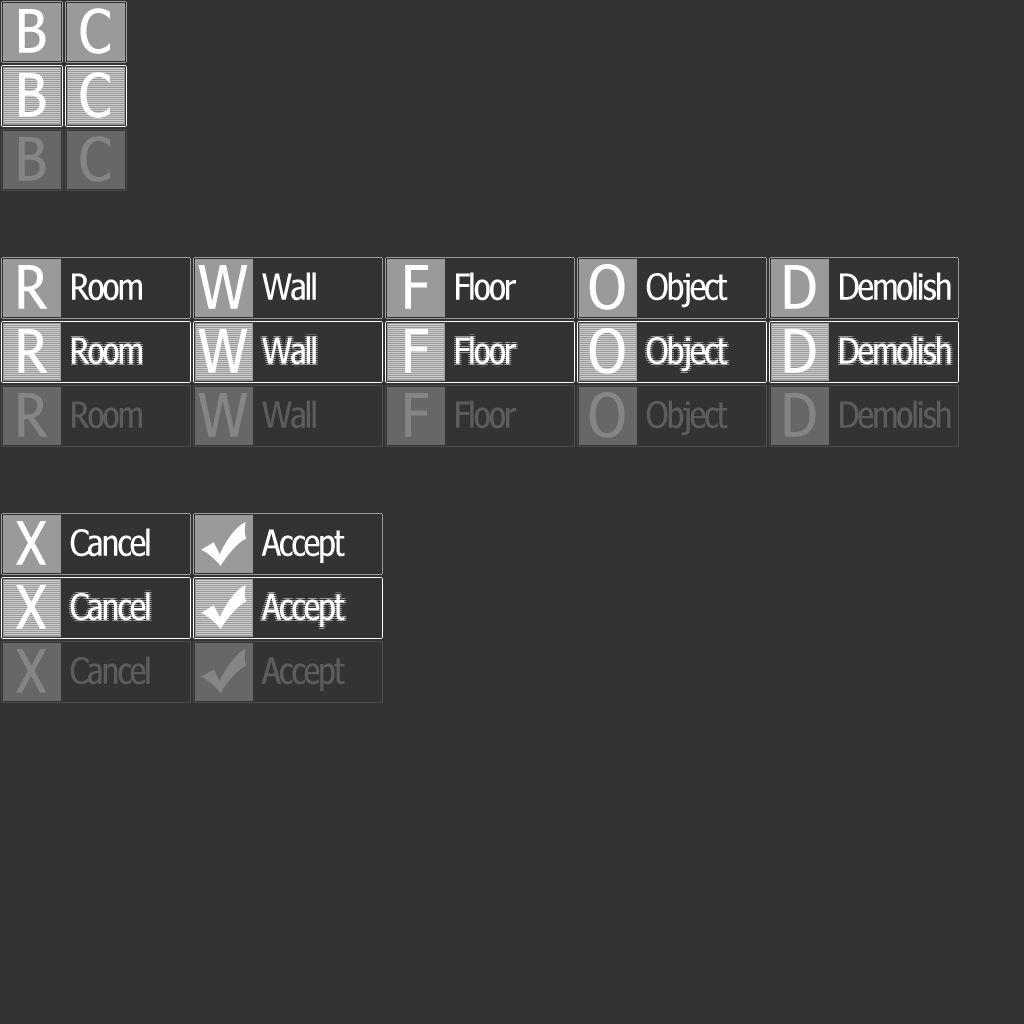
<style>
.page{position:relative;width:1024px;height:1024px;background:#333333}
.page>*{position:absolute;margin:0}
.t1{font:60px "Nina";color:#ffffff}
.t2{font:60px "Nina";color:#858585}
.t3{font:36px "Nina";letter-spacing:-0.04em;color:#ffffff}
.t4{font:36px "Nina";letter-spacing:-0.04em;color:#5c5c5c}
</style>
<div class="page">
<p class="t1" style="left:19px;top:9px;width:27px;height:44px">B</p>
<p class="t1" style="left:80px;top:8px;width:30px;height:46px">C</p>
<p class="t1" style="left:19px;top:73px;width:27px;height:44px">B</p>
<p class="t1" style="left:80px;top:72px;width:30px;height:46px">C</p>
<p class="t2" style="left:19px;top:137px;width:27px;height:44px">B</p>
<p class="t2" style="left:80px;top:136px;width:30px;height:46px">C</p>
<p class="t1" style="left:18px;top:265px;width:30px;height:44px">R</p>
<p class="t1" style="left:198px;top:265px;width:50px;height:44px">W</p>
<p class="t1" style="left:405px;top:265px;width:23px;height:44px">F</p>
<p class="t1" style="left:589px;top:264px;width:36px;height:46px">O</p>
<p class="t1" style="left:784px;top:265px;width:32px;height:44px">D</p>
<p class="t3" style="left:72px;top:273px;width:70px;height:28px">Room</p>
<p class="t3" style="left:262px;top:272px;width:54px;height:29px">Wall</p>
<p class="t3" style="left:456px;top:272px;width:60px;height:29px">Floor</p>
<p class="t3" style="left:646px;top:272px;width:82px;height:36px">Object</p>
<p class="t3" style="left:840px;top:272px;width:111px;height:29px">Demolish</p>
<p class="t1" style="left:18px;top:329px;width:30px;height:44px">R</p>
<p class="t1" style="left:198px;top:329px;width:50px;height:44px">W</p>
<p class="t1" style="left:405px;top:329px;width:23px;height:44px">F</p>
<p class="t1" style="left:589px;top:328px;width:36px;height:46px">O</p>
<p class="t1" style="left:784px;top:329px;width:32px;height:44px">D</p>
<p class="t3" style="left:72px;top:337px;width:70px;height:28px">Room</p>
<p class="t3" style="left:262px;top:336px;width:54px;height:29px">Wall</p>
<p class="t3" style="left:456px;top:336px;width:60px;height:29px">Floor</p>
<p class="t3" style="left:646px;top:336px;width:82px;height:36px">Object</p>
<p class="t3" style="left:840px;top:336px;width:111px;height:29px">Demolish</p>
<p class="t2" style="left:18px;top:393px;width:30px;height:44px">R</p>
<p class="t4" style="left:72px;top:401px;width:70px;height:28px">Room</p>
<p class="t2" style="left:198px;top:393px;width:50px;height:44px">W</p>
<p class="t4" style="left:262px;top:400px;width:54px;height:29px">Wall</p>
<p class="t2" style="left:405px;top:393px;width:23px;height:44px">F</p>
<p class="t4" style="left:456px;top:400px;width:60px;height:29px">Floor</p>
<p class="t2" style="left:589px;top:392px;width:36px;height:46px">O</p>
<p class="t4" style="left:646px;top:400px;width:82px;height:36px">Object</p>
<p class="t2" style="left:784px;top:393px;width:32px;height:44px">D</p>
<p class="t4" style="left:840px;top:400px;width:111px;height:29px">Demolish</p>
<p class="t1" style="left:16px;top:521px;width:31px;height:44px">X</p>
<p class="t3" style="left:70px;top:528px;width:80px;height:29px">Cancel</p>
<p class="t3" style="left:261px;top:529px;width:84px;height:34px">Accept</p>
<p class="t1" style="left:16px;top:585px;width:31px;height:44px">X</p>
<p class="t3" style="left:70px;top:592px;width:80px;height:29px">Cancel</p>
<p class="t3" style="left:261px;top:593px;width:84px;height:34px">Accept</p>
<p class="t2" style="left:16px;top:649px;width:31px;height:44px">X</p>
<p class="t4" style="left:70px;top:656px;width:80px;height:29px">Cancel</p>
<p class="t4" style="left:261px;top:657px;width:84px;height:34px">Accept</p>
</div>
